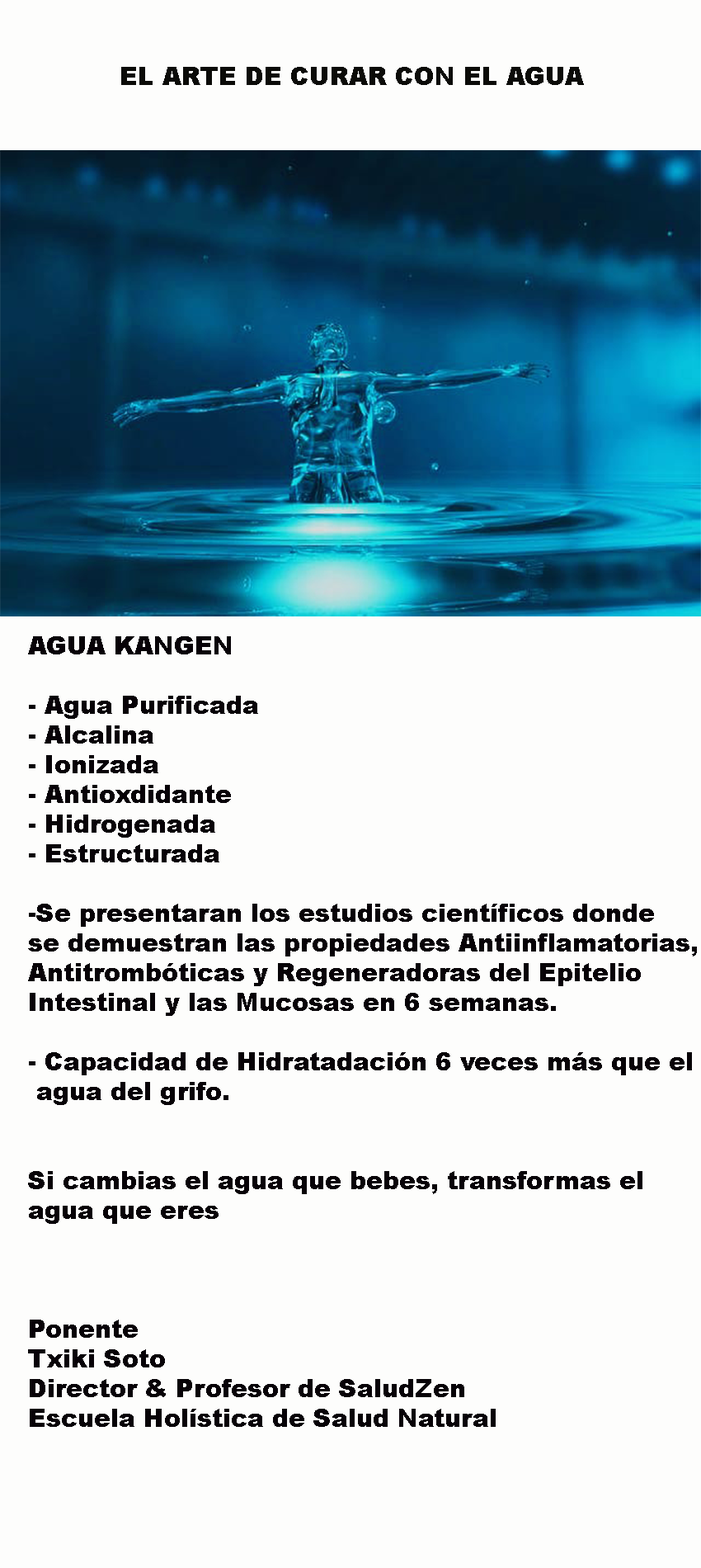
<style>
.page{position:relative;width:701px;height:1568px;background:#fdfdfc}
.page>*{position:absolute;margin:0}
.t1{font:24.8px "Arial-Black";color:#0b0b08}
.t2{font:24.8px "Arial-Black";color:#070207}
</style>
<div class="page">
<p class="t1" style="left:121px;top:67px;width:463px;height:18px">EL ARTE DE CURAR CON EL AGUA</p>
<p class="t2" style="left:28px;top:636px;width:669px;height:791px">AGUA KANGEN<br><br>- Agua Purificada<br>- Alcalina<br>- Ionizada<br>- Antioxdidante<br>- Hidrogenada<br>- Estructurada <br><br>-Se presentaran los estudios científicos donde <br>se demuestran las propiedades Antiinflamatorias,<br>Antitrombóticas y Regeneradoras del Epitelio <br>Intestinal y las Mucosas en 6 semanas.<br><br>- Capacidad de Hidratadación 6 veces más que el<br> agua del grifo.<br><br><br>Si cambias el agua que bebes, transformas el <br>agua que eres<br><br><br><br>Ponente  <br>Txiki Soto<br>Director &amp; Profesor de SaludZen<br>Escuela Holística de Salud Natural</p>
</div>
